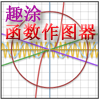
<style>
.page{position:relative;width:100px;height:100px;background:#ffffff}
.page>*{position:absolute;margin:0}
.t1{font:18px "SimSun";color:#a90aa0;font-weight:bold}
.t2{font:18px "SimSun";font-weight:bold}
</style>
<div class="page">
<p class="t1" style="left:5px;top:5px;width:37px;height:18px">趣涂</p>
<p class="t2" style="left:5px;top:23px;width:91px;height:18px">函数作图器</p>
</div>
